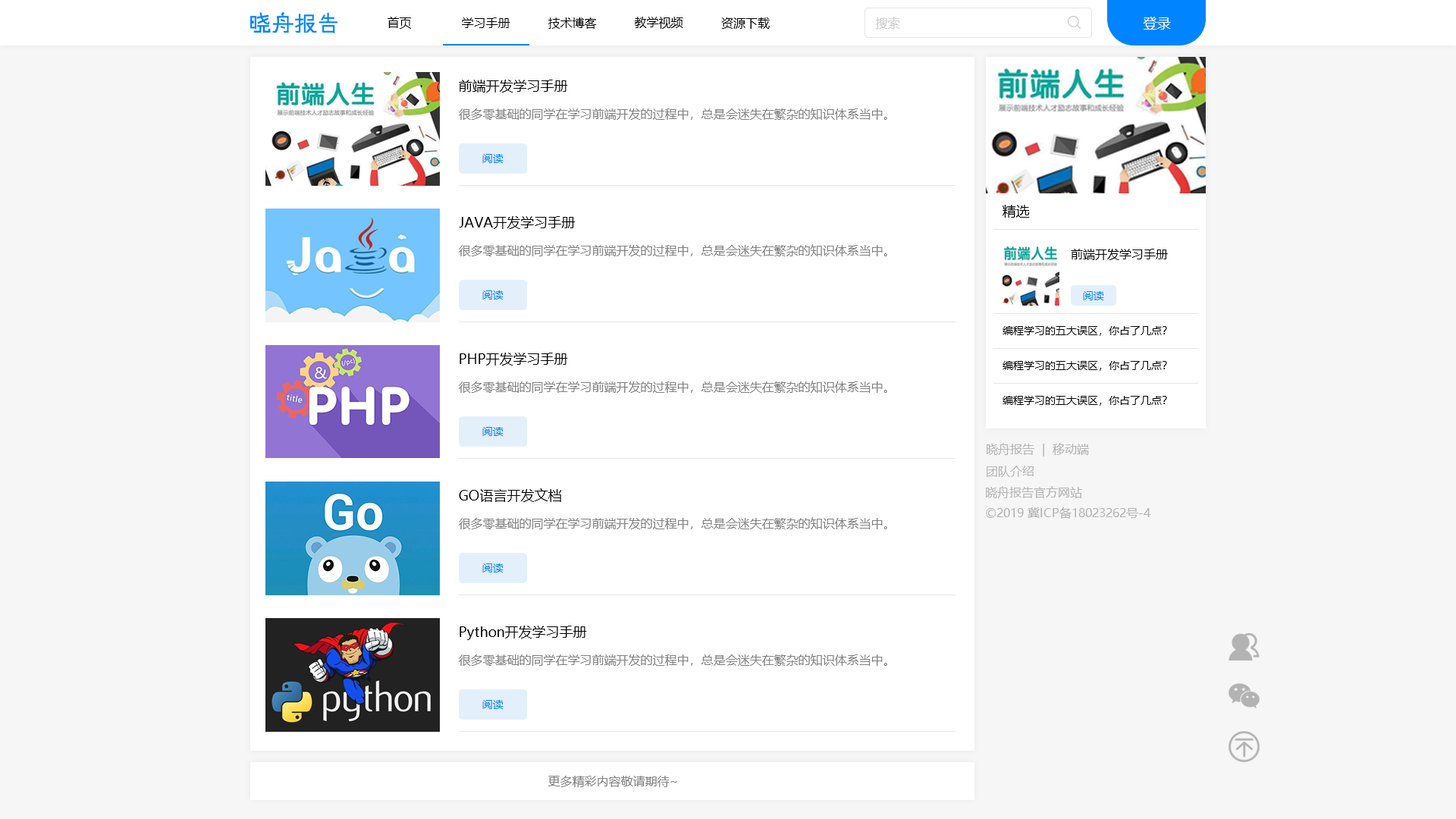
<style>
.page{position:relative;width:1456px;height:819px;background:#ffffff}
.page>*{position:absolute;margin:0}
.t1{font:12.1px "MicrosoftYaHei";color:#000000}
.t2{font:12.1px "MicrosoftYaHei";color:#cccccc}
.t3{font:13.6px "MicrosoftYaHei";color:#ffffff}
.t4{font:13.6px "MicrosoftYaHei";color:#000000}
.t5{font:12.1px "MicrosoftYaHei";color:#808080}
.t6{font:10.6px "MicrosoftYaHei";color:#0084ff}
.t7{font:10.6px "MicrosoftYaHei";color:#000000}
.t8{font:12.1px "MicrosoftYaHei";color:#b3b3b3}
</style>
<div class="page">
<p class="t1" style="left:388px;top:17px;width:24px;height:12px">首页</p>
<p class="t1" style="left:462px;top:17px;width:48px;height:11px">学习手册</p>
<p class="t1" style="left:548px;top:17px;width:49px;height:12px">技术博客</p>
<p class="t1" style="left:635px;top:17px;width:48px;height:12px">教学视频</p>
<p class="t1" style="left:721px;top:17px;width:49px;height:12px">资源下载</p>
<p class="t2" style="left:876px;top:17px;width:24px;height:12px">搜索</p>
<p class="t3" style="left:1143px;top:17px;width:28px;height:13px">登录</p>
<p class="t4" style="left:459px;top:80px;width:109px;height:13px">前端开发学习手册</p>
<p class="t5" style="left:459px;top:108px;width:428px;height:12px">很多零基础的同学在学习前端开发的过程中，总是会迷失在繁杂的知识体系当中。</p>
<p class="t6" style="left:482px;top:154px;width:22px;height:9px">阅读</p>
<p class="t4" style="left:1003px;top:205px;width:27px;height:13px">精选</p>
<p class="t4" style="left:459px;top:216px;width:116px;height:13px">JAVA开发学习手册</p>
<p class="t5" style="left:459px;top:244px;width:428px;height:12px">很多零基础的同学在学习前端开发的过程中，总是会迷失在繁杂的知识体系当中。</p>
<p class="t1" style="left:1071px;top:249px;width:97px;height:11px">前端开发学习手册</p>
<p class="t6" style="left:482px;top:290px;width:22px;height:10px">阅读</p>
<p class="t6" style="left:1083px;top:291px;width:21px;height:9px">阅读</p>
<p class="t7" style="left:1003px;top:326px;width:164px;height:10px">编程学习的五大误区，你占了几点？</p>
<p class="t4" style="left:460px;top:353px;width:108px;height:13px">PHP开发学习手册</p>
<p class="t7" style="left:1003px;top:361px;width:164px;height:10px">编程学习的五大误区，你占了几点？</p>
<p class="t5" style="left:459px;top:381px;width:428px;height:12px">很多零基础的同学在学习前端开发的过程中，总是会迷失在繁杂的知识体系当中。</p>
<p class="t7" style="left:1003px;top:396px;width:164px;height:10px">编程学习的五大误区，你占了几点？</p>
<p class="t6" style="left:482px;top:427px;width:22px;height:9px">阅读</p>
<p class="t8" style="left:987px;top:443px;width:102px;height:14px">晓舟报告  |  移动端</p>
<p class="t8" style="left:987px;top:466px;width:47px;height:11px">团队介绍</p>
<p class="t4" style="left:459px;top:488px;width:102px;height:14px">GO语言开发文档</p>
<p class="t8" style="left:986px;top:486px;width:96px;height:12px">晓舟报告官方网站</p>
<p class="t8" style="left:986px;top:507px;width:165px;height:12px">©2019 冀ICP备18023262号-4</p>
<p class="t5" style="left:459px;top:517px;width:428px;height:12px">很多零基础的同学在学习前端开发的过程中，总是会迷失在繁杂的知识体系当中。</p>
<p class="t6" style="left:482px;top:563px;width:22px;height:10px">阅读</p>
<p class="t4" style="left:460px;top:626px;width:127px;height:14px">Python开发学习手册</p>
<p class="t5" style="left:459px;top:654px;width:428px;height:12px">很多零基础的同学在学习前端开发的过程中，总是会迷失在繁杂的知识体系当中。</p>
<p class="t6" style="left:482px;top:700px;width:22px;height:9px">阅读</p>
<p class="t5" style="left:548px;top:776px;width:129px;height:11px">更多精彩内容敬请期待~</p>
</div>
